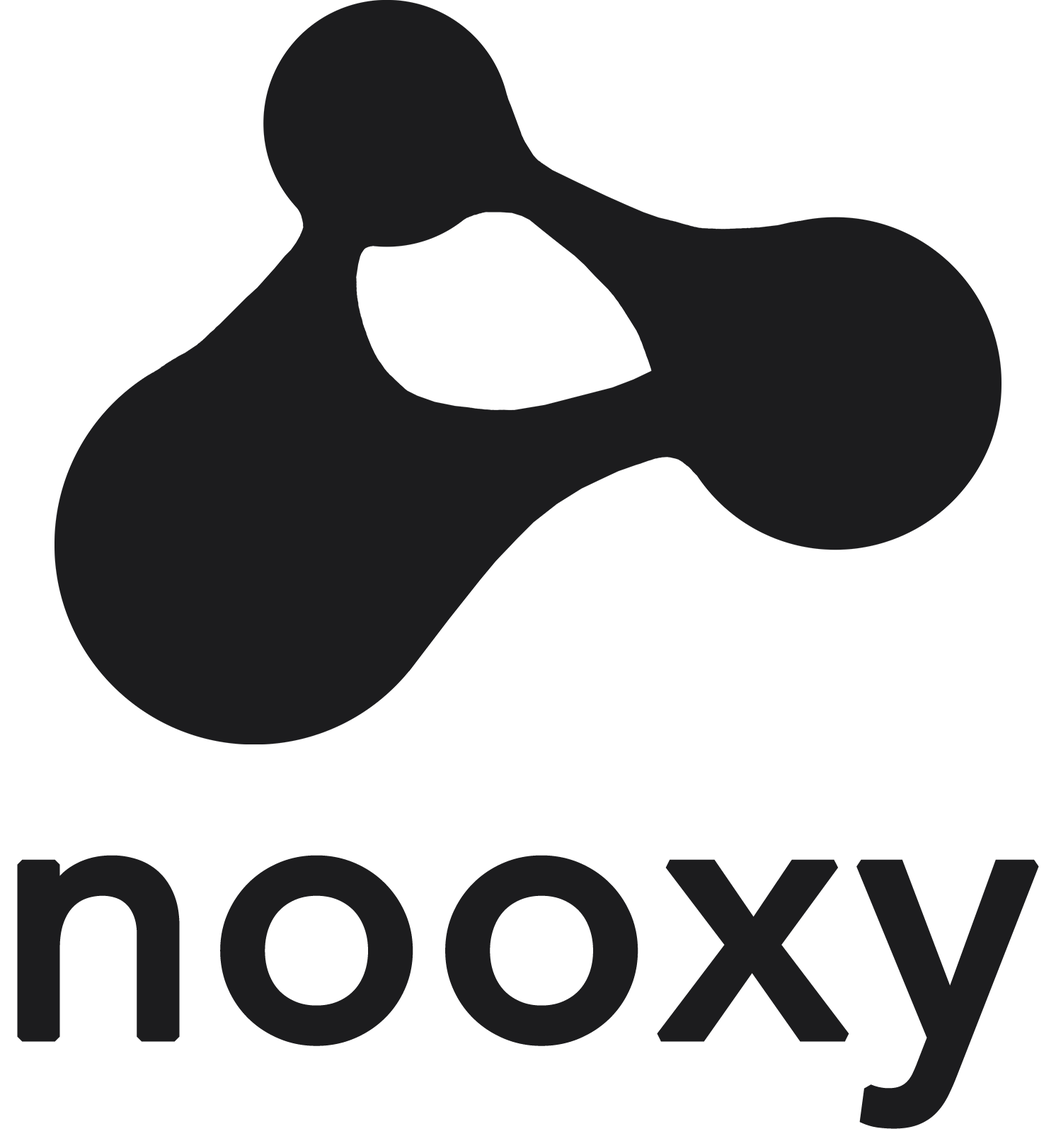
<style>
.page{position:relative;width:1056px;height:1129px;background:#ffffff}
.page>*{position:absolute;margin:0}
.t1{font:362.5px "Avenir-Medium";color:#1c1c1e;font-weight:bold}
</style>
<div class="page">
<p class="t1" style="left:17px;top:855px;width:1022px;height:274px">nooxy</p>
</div>
